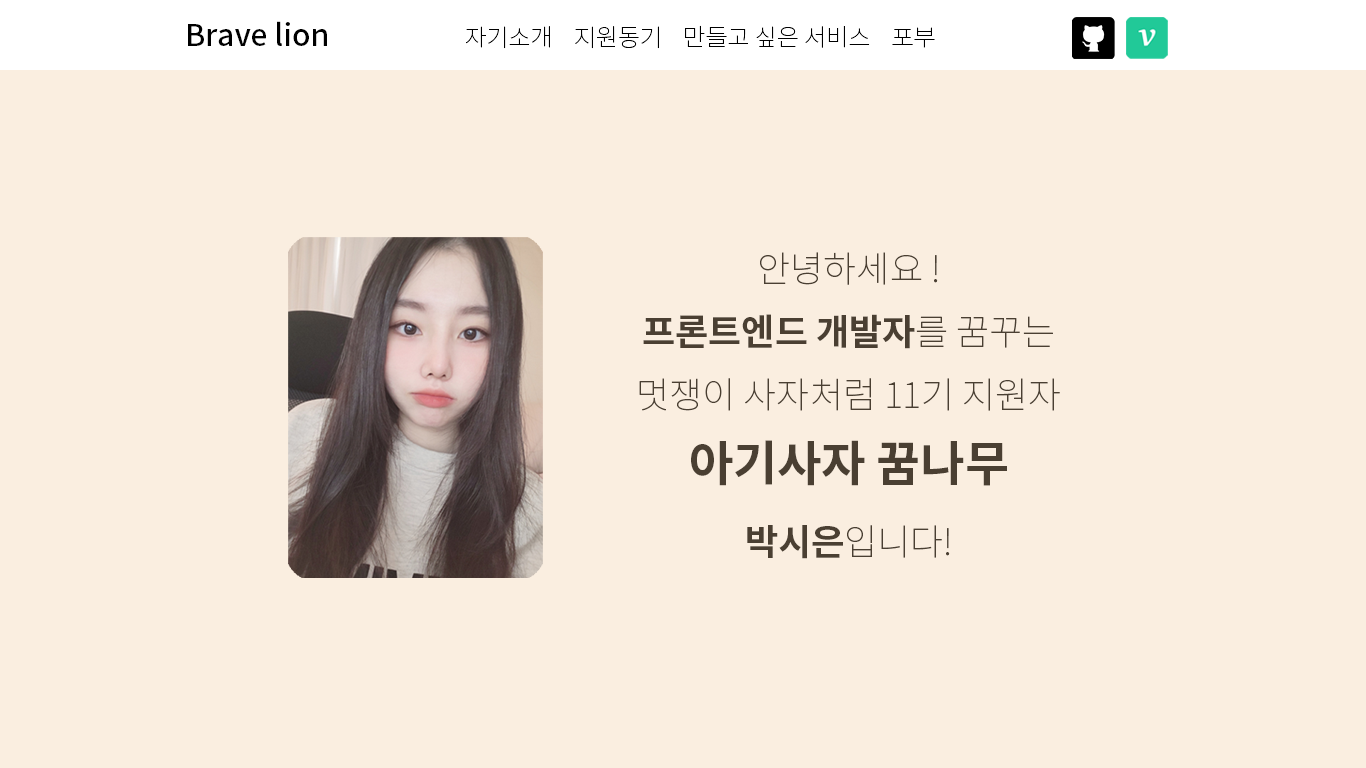
<style>
.page{position:relative;width:1366px;height:768px;background:#faeee0}
.page>*{position:absolute;margin:0}
.t1{font:30px "NotoSansKR-Medium";color:#000000}
.t2{font:24px "NotoSansKR-Thin";color:#000000}
.t3{font:36px "NotoSansKR-Thin";color:#4a3f32}
.t4{font:36px "NotoSansKR-Bold";color:#4a3f32}
.t5{font:48px "NotoSansKR-Bold";color:#4a3f32}
</style>
<div class="page">
<p class="t1" style="left:188px;top:21px;width:139px;height:25px">Brave lion</p>
<p class="t2" style="left:466px;top:25px;width:469px;height:24px">자기소개    지원동기    만들고 싶은 서비스    포부</p>
<p class="t3" style="left:639px;top:252px;width:421px;height:307px;text-align:justify">안녕하세요 !<br><span class="t4">프론트엔드 개발자</span>를 꿈꾸는<br>멋쟁이 사자처럼 11기 지원자<br><span class="t5">아기사자 꿈나무<br></span><span class="t4">박시은</span>입니다!</p>
</div>
